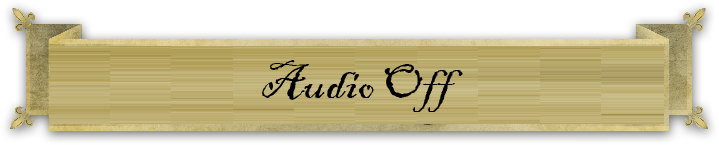
<style>
.page{position:relative;width:719px;height:145px}
.page>*{position:absolute;margin:0}
.t1{font:50px "BlackadderITC-Regular";color:#000000}
</style>
<div class="page">
<p class="t1" style="left:262px;top:60px;width:201px;height:52px">Audio Off</p>
</div>
